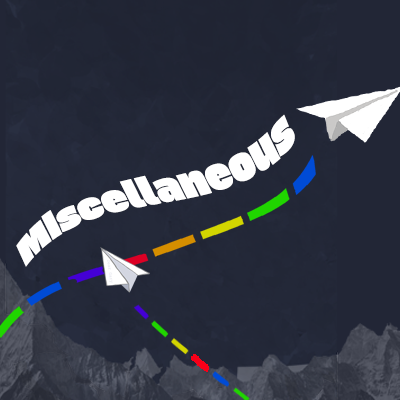
<style>
.page{position:relative;width:400px;height:400px}
.page>*{position:absolute;margin:0}
.t1{font:38px "GasoekOne-Regular";color:#ffffff}
</style>
<div class="page">
<p class="t1" style="left:16px;top:114px;width:279px;height:153px;rotate:-26deg">Miscellaneous</p>
</div>
